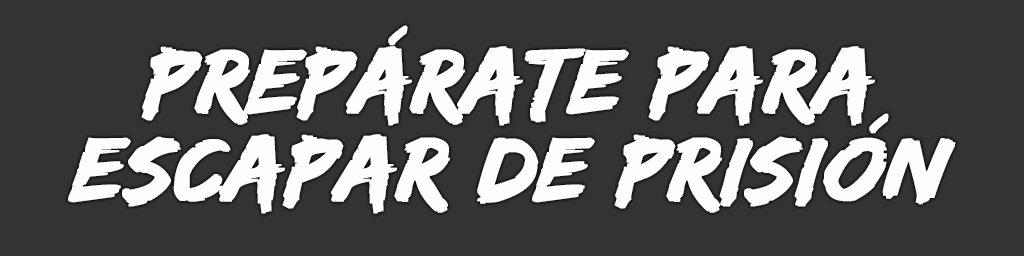
<style>
.page{position:relative;width:1024px;height:256px;background:#333333}
.page>*{position:absolute;margin:0}
.t1{font:94px/88px "EdoSZ";color:#fefefe;font-weight:bold;font-style:italic;scale:1.04 1}
</style>
<div class="page">
<p class="t1" style="left:68px;top:25px;width:888px;height:189px;text-align:center">Prepárate para<br>escapar de prisión</p>
</div>
